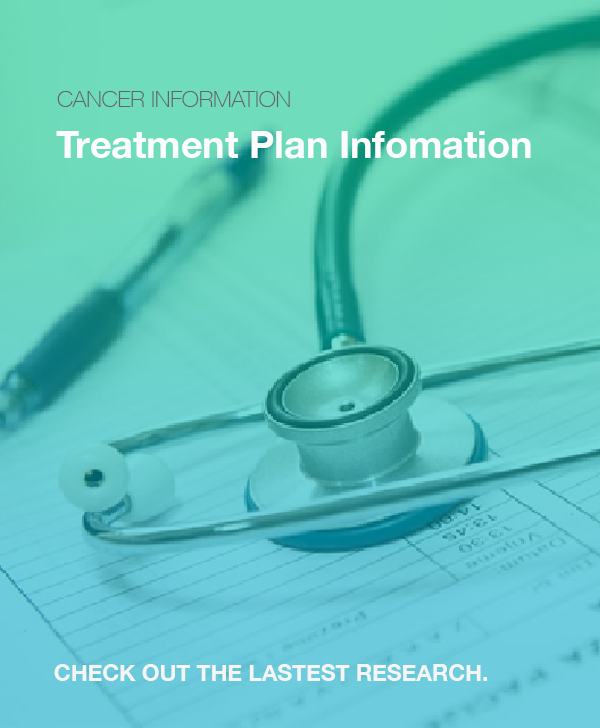
<style>
.page{position:relative;width:600px;height:728px}
.page>*{position:absolute;margin:0}
.t1{font:22.7px "HelveticaNeue-Thin";color:#646464;text-transform:uppercase}
.t2{font:37.9px "HelveticaNeue-Bold";color:#fcfcfc}
.t3{font:22.7px "HelveticaNeue-Bold";color:#f5f5f5;text-transform:uppercase}
</style>
<div class="page">
<p class="t1" style="left:57px;top:91px;width:233px;height:16px">Cancer Information</p>
<p class="t2" style="left:56px;top:131px;width:475px;height:28px">Treatment Plan Infomation</p>
<p class="t3" style="left:54px;top:664px;width:433px;height:17px">Check out the lastest research.</p>
</div>
